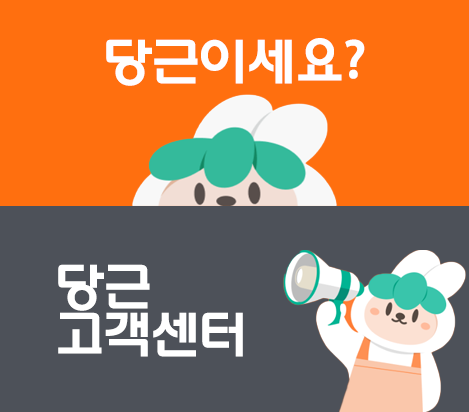
<style>
.page{position:relative;width:469px;height:412px;background:#ff6f0f}
.page>*{position:absolute;margin:0}
.t1{font:50px "Korail-Round-Gothic-Bold";letter-spacing:-0.04em;color:#fefeff}
.t2{font:50px/48px "Korail-Round-Gothic-Bold";letter-spacing:-0.04em;color:#ffffff}
</style>
<div class="page">
<p class="t1" style="left:106px;top:38px;width:259px;height:48px">당근이세요?</p>
<p class="t2" style="left:58px;top:264px;width:185px;height:93px">당근 <br>고객센터</p>
</div>
